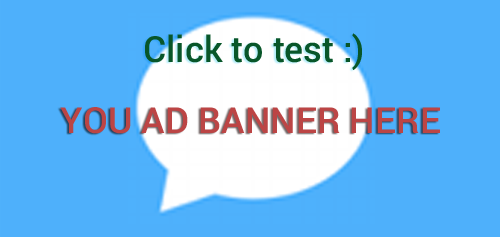
<style>
.page{position:relative;width:500px;height:237px;background:#4eb0fb}
.page>*{position:absolute;margin:0}
.t1{font:36px "Roboto-Medium";color:#085629}
.t2{font:36px "Roboto-Medium";color:#bc4545}
</style>
<div class="page">
<p class="t1" style="left:145px;top:33px;width:217px;height:37px">Click to test :)</p>
<p class="t2" style="left:60px;top:107px;width:380px;height:27px">YOU AD BANNER HERE</p>
</div>
